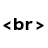
<style>
.page{position:relative;width:48px;height:48px;background:#ffffff}
.page>*{position:absolute;margin:0}
.t1{font:14.1px "HiraKakuStd-W8";letter-spacing:0.4em;color:#000000}
</style>
<div class="page">
<p class="t1" style="left:3px;top:18px;width:41px;height:12px">&lt;br&gt;</p>
</div>
